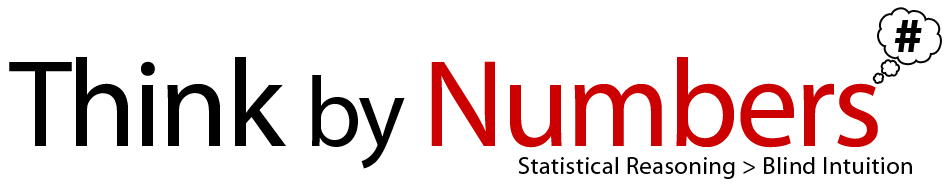
<style>
.page{position:relative;width:951px;height:185px;background:#ffffff}
.page>*{position:absolute;margin:0}
.t1{font:48px "Bauhaus93";letter-spacing:-0.025em;color:#000000}
.t2{font:125px "MyriadPro-Regular";letter-spacing:-0.025em;color:#cc0000}
.t3{font:125px "MyriadPro-Regular";letter-spacing:-0.025em;color:#000000}
.t4{font:100px "MyriadPro-Regular";letter-spacing:-0.025em;color:#000000}
.t5{font:24px "MyriadPro-Regular";letter-spacing:0.025em;color:#000000}
</style>
<div class="page">
<p class="t1" style="left:894px;top:20px;width:28px;height:32px">#</p>
<p class="t2" style="left:9px;top:57px;width:869px;height:112px"><span class="t3">Think </span><span class="t4">by </span>Numbers</p>
<p class="t5" style="left:518px;top:157px;width:394px;height:22px">Statistical Reasoning &gt; Blind Intuition</p>
</div>
